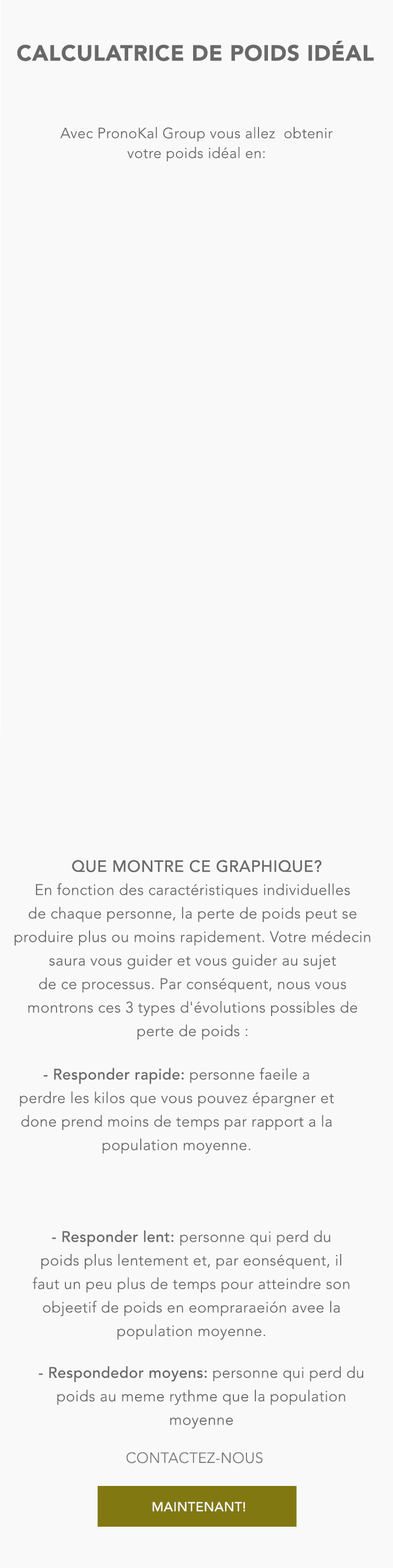
<style>
.page{position:relative;width:393px;height:1568px;background:#f9f9f9}
.page>*{position:absolute;margin:0}
.t1{font:14.6px/19.9px "Avenir-Light";letter-spacing:0.02em;color:#6a6a6a}
.t2{font:16.2px "Avenir-Medium";letter-spacing:0.02em;color:#6a6a6a}
.t3{font:15.2px/23.5px "Avenir-Light";letter-spacing:0.02em;color:#6a6a6a}
.t4{font:15.2px/23.5px "Avenir-Medium";letter-spacing:0.02em;color:#6a6a6a}
</style>
<div class="page">
<p class="t1" style="left:60px;top:127px;width:272px;height:35px;text-align:center">Avec PronoKal Group vous allez  obtenir<br>votre poids idéal en:</p>
<p class="t2" style="left:72px;top:860px;width:249px;height:12px">QUE MONTRE CE GRAPHIQUE?</p>
<p class="t3" style="left:15px;top:883px;width:355px;height:157px;text-align:center">En fonction des caractéristiques individuelles<br>de chaque personne, la perte de poids peut se<br>produire plus ou moins rapidement. Votre médecin<br>saura vous guider et vous guider au sujet<br>de ce processus. Par conséquent, nous vous<br>montrons ces 3 types d'évolutions possibles de perte de poids :</p>
<p class="t3" style="left:20px;top:1068px;width:313px;height:86px;text-align:center"><span class="t4">- Responder rapide:</span> personne faeile a<br>perdre les kilos que vous pouvez épargner et<br>done prend moins de temps par rapport a la<br>population moyenne.</p>
<p class="t3" style="left:32px;top:1230px;width:317px;height:110px;text-align:center"><span class="t4">- Responder lent: </span>personne qui perd du<br>poids plus lentement et, par eonséquent, il<br>faut un peu plus de temps pour atteindre son<br>objeetif de poids en eompraraeión avee la <br>population moyenne.</p>
<p class="t3" style="left:39px;top:1366px;width:324px;height:63px;text-align:center"><span class="t4">- Respondedor moyens:</span> personne qui perd du<br>poids au meme rythme que la population<br>moyenne</p>
</div>
